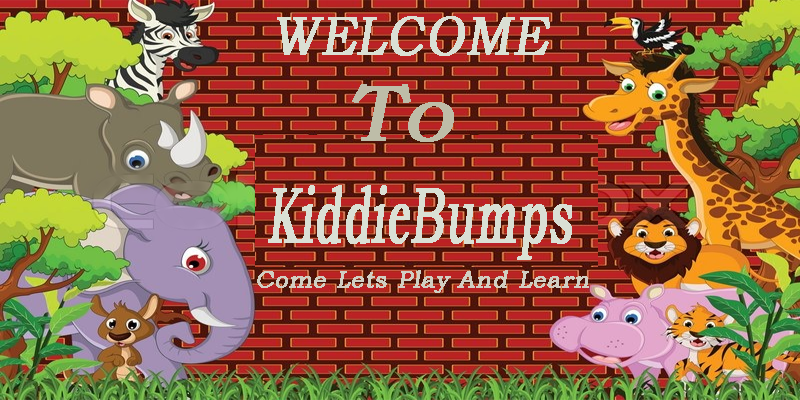
<style>
.page{position:relative;width:800px;height:400px}
.page>*{position:absolute;margin:0}
.t1{font:55.3px "BookmanOldStyle";color:#dae0d5;font-weight:bold;font-style:italic;scale:0.89 1}
.t2{font:79.4px "BookmanOldStyle";color:#bebda8;font-weight:bold;font-style:italic;scale:1.13 1}
.t3{font:78.6px "BookmanOldStyle";color:#dae0d5;font-weight:bold;font-style:italic;scale:0.55 1}
.t4{font:24.2px "BookmanOldStyle";color:#d1cfc3;font-weight:bold;font-style:italic}
</style>
<div class="page">
<p class="t1" style="left:277px;top:16px;width:273px;height:40px">WELCOME</p>
<p class="t2" style="left:352px;top:84px;width:102px;height:58px">To</p>
<p class="t3" style="left:268px;top:185px;width:304px;height:75px">KiddieBumps</p>
<p class="t4" style="left:257px;top:270px;width:332px;height:23px">Come Lets Play And Learn</p>
</div>
